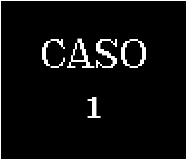
<style>
.page{position:relative;width:187px;height:160px;background:#000000}
.page>*{position:absolute;margin:0}
.t1{font:41.7px "ArgentPixelCF-Regular";color:#ffffff}
</style>
<div class="page">
<p class="t1" style="left:42px;top:38px;width:104px;height:80px;text-align:center">CASO<br>1</p>
</div>
